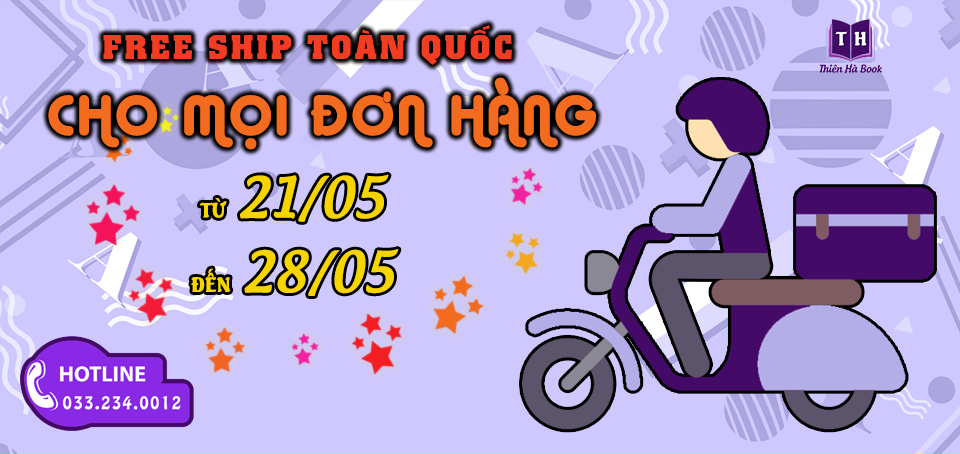
<style>
.page{position:relative;width:960px;height:454px;background:#cec8ff}
.page>*{position:absolute;margin:0}
.t1{font:33.3px "UTM-Colossalis";letter-spacing:0.1em;color:#f23d24}
.t2{font:53.3px "UTM-Alba-Matter";letter-spacing:0.1em;color:#f36b1e}
.t3{font:53.3px/74.4px "UTM-Androgyne";color:#f5d400}
.t4{font:20px/74.4px "UTMSeagullBold";color:#f5d400}
</style>
<div class="page">
<p class="t1" style="left:103px;top:25px;width:409px;height:40px">FREE SHIP TOÀN QUỐC</p>
<p class="t2" style="left:48px;top:77px;width:548px;height:73px">CHO MỌI ĐƠN HÀNG</p>
<p class="t3" style="left:191px;top:174px;width:208px;height:122px;text-align:center"><span class="t4">TỪ  </span>21/05 <br><span class="t4">ĐẾN  </span>28/05</p>
</div>
